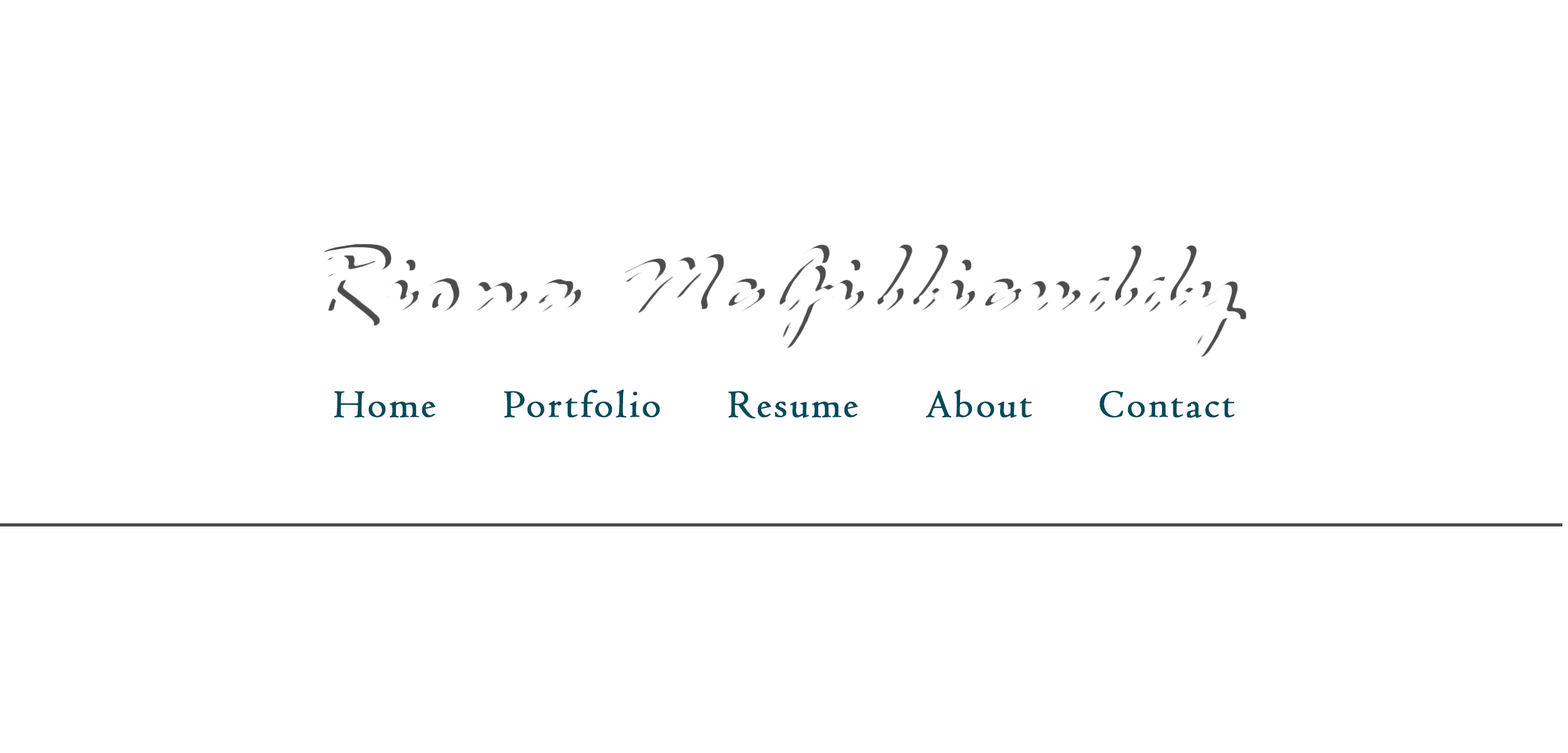
<style>
.page{position:relative;width:1568px;height:753px;background:#ffffff}
.page>*{position:absolute;margin:0}
.t1{font:40.2px "Centaur";letter-spacing:0.05em;color:#034a5a;font-weight:bold}
</style>
<div class="page">
<p class="t1" style="left:334px;top:390px;width:901px;height:29px">Home     Portfolio     Resume     About     Contact</p>
</div>
